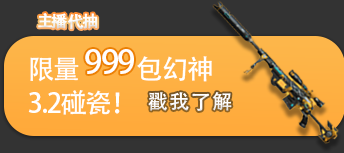
<style>
.page{position:relative;width:344px;height:153px;background:#333333}
.page>*{position:absolute;margin:0}
.t1{font:16px "AdobeHeitiStd-Regular";letter-spacing:-0.06em;color:#ffffff;font-weight:bold}
.t2{font:32.8px "AdobeHeitiStd-Regular";letter-spacing:-0.06em;color:#ffffff}
.t3{font:27px/34px "AdobeHeitiStd-Regular";letter-spacing:-0.06em;color:#ffffff}
.t4{font:20.4px "AdobeHeitiStd-Regular";letter-spacing:0.06em;color:#ffffff}
</style>
<div class="page">
<p class="t1" style="left:38px;top:13px;width:60px;height:17px">主播代抽</p>
<p class="t2" style="left:85px;top:49px;width:49px;height:25px">999</p>
<p class="t3" style="left:28px;top:56px;width:184px;height:59px">限量             包幻神<br>3.2碰瓷！</p>
<p class="t4" style="left:148px;top:92px;width:84px;height:19px">戳我了解</p>
</div>
